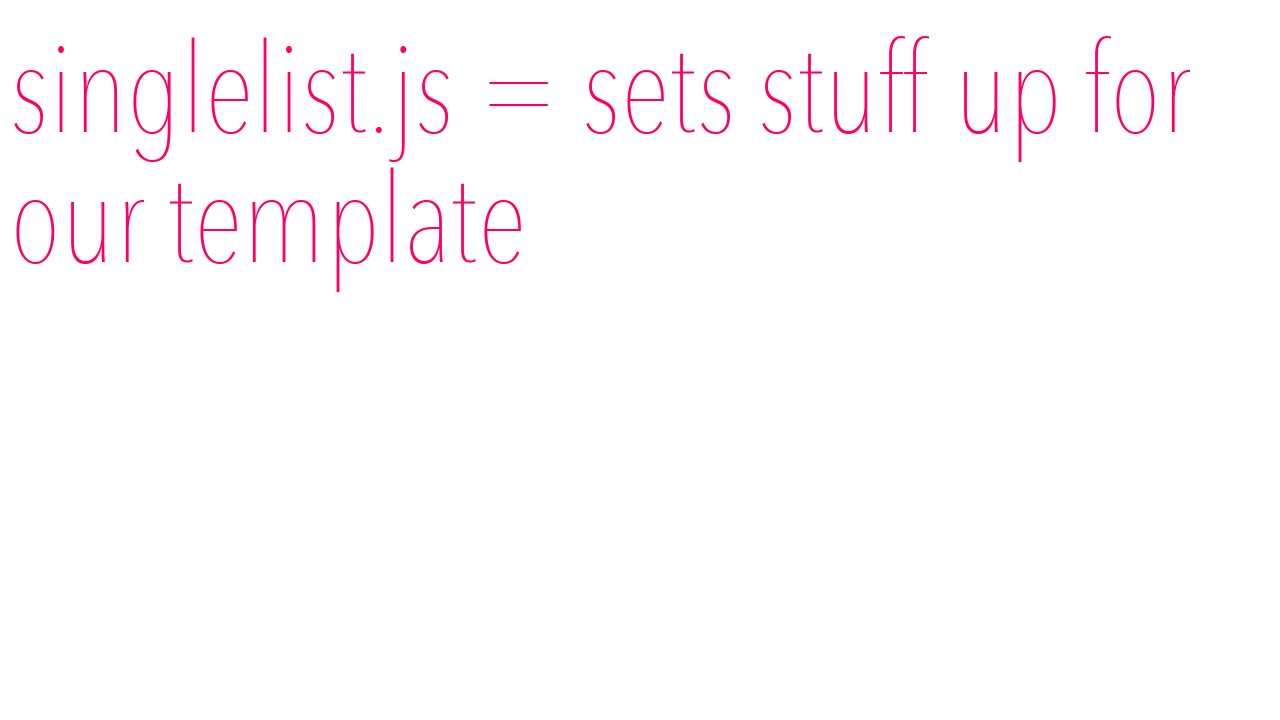
<style>
.page{position:relative;width:1280px;height:720px;background:#ffffff}
.page>*{position:absolute;margin:0}
.t1{font:125px "AvenirNextCondensed-UltraLight";color:#ff0066}
</style>
<div class="page">
<p class="t1" style="left:14px;top:36px;width:1176px;height:257px">singlelist.js = sets stuff up for<br>our template</p>
</div>
